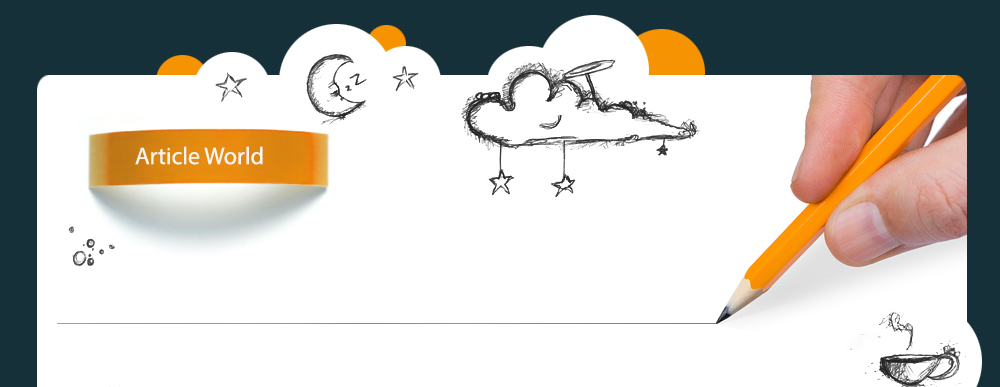
<style>
.page{position:relative;width:1000px;height:387px;background:#ffffff}
.page>*{position:absolute;margin:0}
.t1{font:24px "MyriadPro-Regular";color:#f9f5ef}
</style>
<div class="page">
<p class="t1" style="left:135px;top:146px;width:128px;height:19px">Article World</p>
</div>
